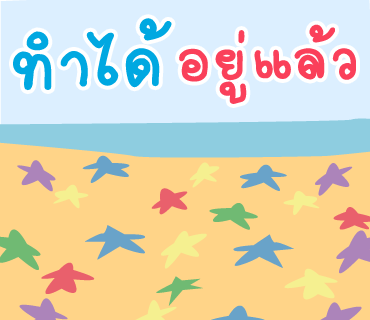
<style>
.page{position:relative;width:370px;height:320px;background:#ffd488}
.page>*{position:absolute;margin:0}
.t1{font:105px "2005_iannnnnMTV";letter-spacing:0.025em;color:#00a8e1;scale:1.06 1}
.t2{font:85px "2005_iannnnnMTV";letter-spacing:0.025em;color:#fa405a;scale:1.06 1}
</style>
<div class="page">
<p class="t1" style="left:13px;top:18px;width:159px;height:73px;rotate:-3deg">ทำได้</p>
<p class="t2" style="left:179px;top:24px;width:177px;height:80px;rotate:-1deg">อยู่แล้ว</p>
</div>
